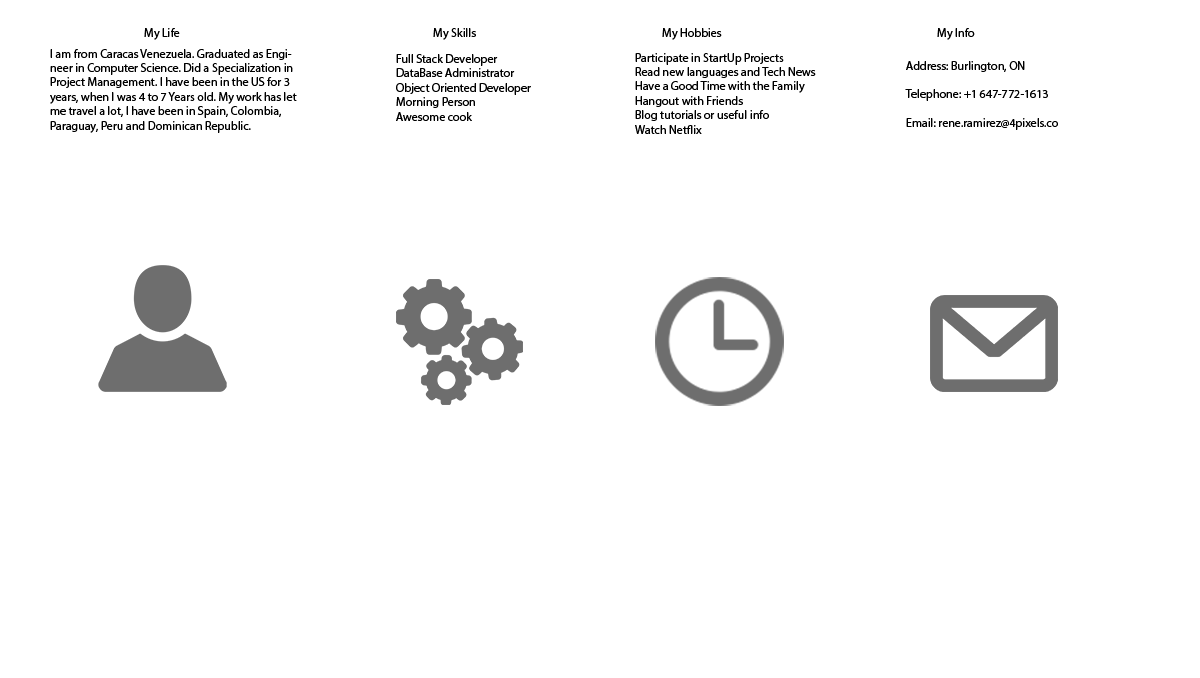
<style>
.page{position:relative;width:1200px;height:678px;background:#ffffff}
.page>*{position:absolute;margin:0}
.t1{font:12px "MyriadPro-Regular";color:#000000}
</style>
<div class="page">
<p class="t1" style="left:144px;top:28px;width:36px;height:12px">My Life</p>
<p class="t1" style="left:433px;top:28px;width:43px;height:12px">My Skills</p>
<p class="t1" style="left:662px;top:28px;width:60px;height:12px">My Hobbies</p>
<p class="t1" style="left:937px;top:28px;width:38px;height:12px">My Info</p>
<p class="t1" style="left:50px;top:49px;width:247px;height:84px">I am from Caracas Venezuela. Graduated as Engineer in Computer Science. Did a Specialization in Project Management. I have been in the US for 3 years, when I was 4 to 7 Years old. My work has let me travel a lot, I have been in Spain, Colombia, Paraguay, Peru and Dominican Republic.</p>
<p class="t1" style="left:396px;top:54px;width:135px;height:67px">Full Stack Developer<br>DataBase Administrator<br>Object Oriented Developer<br>Morning Person<br>Awesome cook</p>
<p class="t1" style="left:635px;top:53px;width:181px;height:81px">Participate in StartUp Projects<br>Read new languages and Tech News<br>Have a Good Time with the Family<br>Hangout with Friends<br>Blog tutorials or useful info<br>Watch Netflix</p>
<p class="t1" style="left:905px;top:61px;width:153px;height:69px">Address: Burlington, ON<br><br>Telephone: +1 647-772-1613<br><br>Email: rene.ramirez@4pixels.co</p>
</div>
